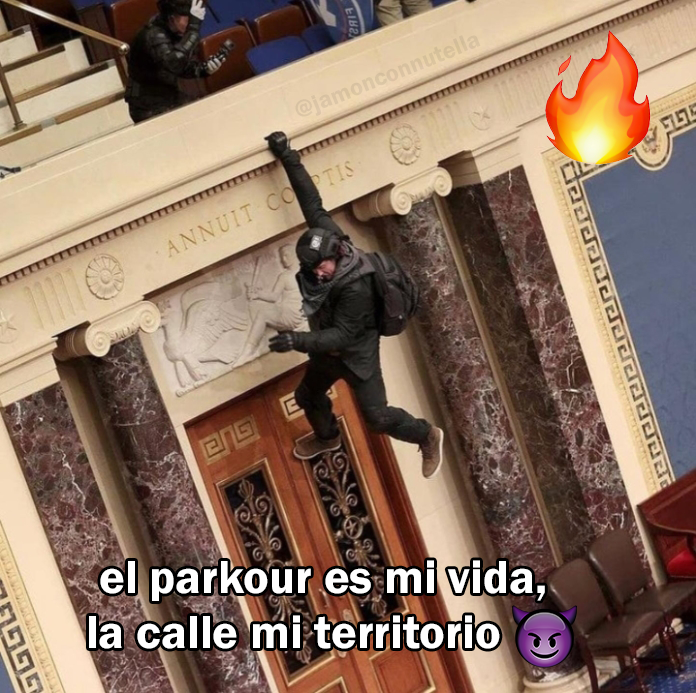
<style>
.page{position:relative;width:696px;height:693px}
.page>*{position:absolute;margin:0}
.t1{font:48px "FranklinGothic-Demi";color:#ffffff}
</style>
<div class="page">
<p class="t1" style="left:89px;top:560px;width:456px;height:89px;text-align:center">el parkour es mi vida,<br>la calle mi territorio</p>
</div>
